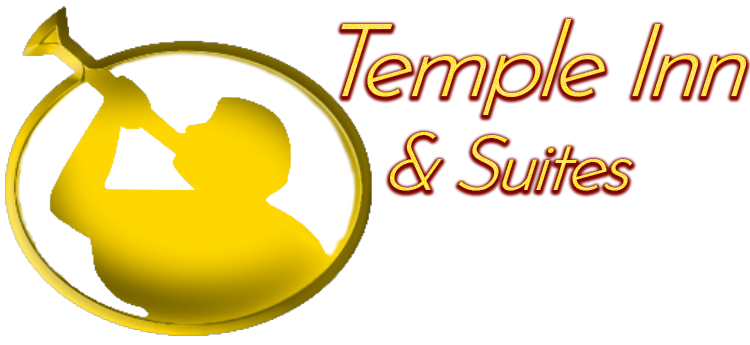
<style>
.page{position:relative;width:750px;height:345px;background:#ffffff}
.page>*{position:absolute;margin:0}
.t1{font:100px "JosefinSans-LightItalic";letter-spacing:-0.06em;font-style:italic;scale:1.06 1}
.t2{font:77px "JosefinSans-LightItalic";letter-spacing:-0.06em;font-style:italic;scale:1.06 1}
</style>
<div class="page">
<p class="t1" style="left:341px;top:19px;width:406px;height:96px">Temple Inn</p>
<p class="t2" style="left:390px;top:132px;width:243px;height:59px">&amp; Suites</p>
</div>
